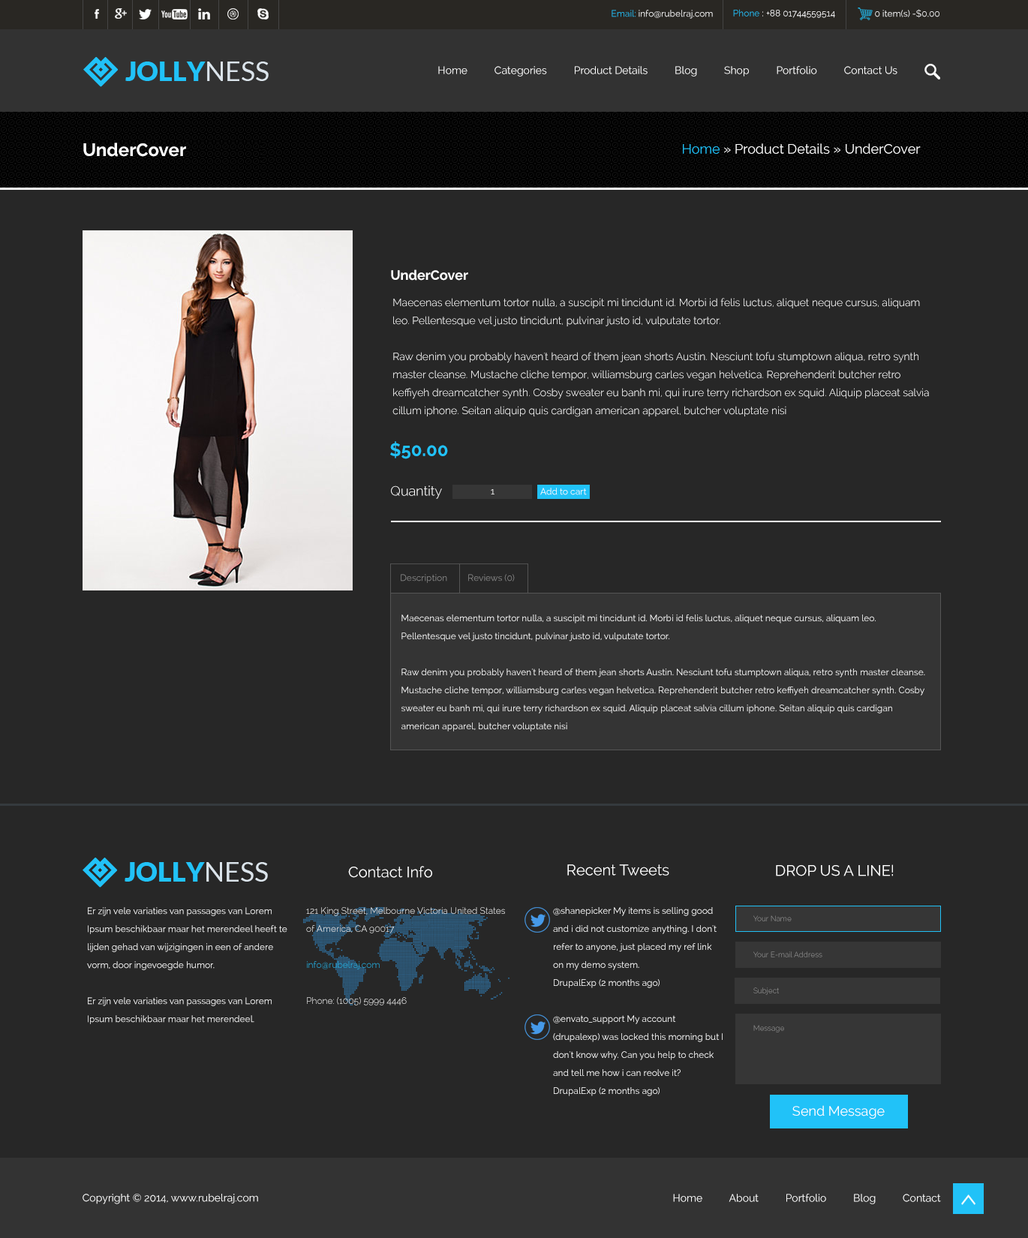
<style>
.page{position:relative;width:1028px;height:1238px;background:#272727}
.page>*{position:absolute;margin:0}
.t1{font:9px "Raleway-Regular"}
.t2{font:9px "Raleway-Regular";color:#ffffff}
.t3{font:9px "Raleway-Regular";color:#21c2f8}
.t4{font:10.5px "Raleway-Regular";color:#ffffff}
.t5{font:18px "Raleway-Bold";color:#ffffff}
.t6{font:13.5px "Raleway-Regular";color:#ffffff}
.t7{font:13.5px "Raleway-Regular";color:#21c2f8}
.t8{font:13.5px "Raleway-Bold";color:#ffffff}
.t9{font:10.5px/18px "Raleway-Light";color:#ffffff}
.t10{font:18px "Raleway-Bold";color:#21c2f8}
.t11{font:13.5px "Raleway-Light";color:#ffffff}
.t12{font:9px "Raleway-Regular";color:#888888}
.t13{font:9px/18px "Raleway-Regular";color:#ffffff}
.t14{font:15px "Raleway-Regular";color:#ffffff}
.t15{font:9px/18px "Raleway-Light"}
.t16{font:7.5px "Raleway-Light";color:#999999}
.t17{font:7.5px "Raleway-Light"}
</style>
<div class="page">
<p class="t1" style="left:611px;top:10px;width:101px;height:9px">Email: info@rubelraj.com</p>
<p class="t2" style="left:733px;top:9px;width:102px;height:9px"><span class="t3">Phone </span>: +88 01744559514</p>
<p class="t1" style="left:874px;top:9px;width:65px;height:9px">0 item(s) -$0.00</p>
<p class="t4" style="left:438px;top:66px;width:459px;height:10px">Home          Categories          Product Details          Blog          Shop          Portfolio          Contact Us</p>
<p class="t5" style="left:83px;top:142px;width:103px;height:15px">UnderCover</p>
<p class="t6" style="left:682px;top:143px;width:238px;height:11px"><span class="t7">Home</span> » Product Details » UnderCover</p>
<p class="t8" style="left:391px;top:269px;width:77px;height:11px">UnderCover</p>
<p class="t9" style="left:392px;top:298px;width:536px;height:119px">Maecenas elementum tortor nulla, a suscipit mi tincidunt id. Morbi id felis luctus, aliquet neque cursus, aliquam leo. Pellentesque vel justo tincidunt, pulvinar justo id, vulputate tortor.<br><br>Raw denim you probably haven't heard of them jean shorts Austin. Nesciunt tofu stumptown aliqua, retro synth master cleanse. Mustache cliche tempor, williamsburg carles vegan helvetica. Reprehenderit butcher retro keffiyeh dreamcatcher synth. Cosby sweater eu banh mi, qui irure terry richardson ex squid. Aliquip placeat salvia cillum iphone. Seitan aliquip quis cardigan american apparel, butcher voluptate nisi</p>
<p class="t10" style="left:390px;top:441px;width:58px;height:18px">$50.00</p>
<p class="t11" style="left:391px;top:485px;width:51px;height:14px">Quantity</p>
<p class="t2" style="left:490px;top:489px;width:4px;height:5px">1</p>
<p class="t2" style="left:540px;top:488px;width:46px;height:7px">Add to cart</p>
<p class="t12" style="left:400px;top:574px;width:47px;height:9px">Description</p>
<p class="t12" style="left:468px;top:574px;width:46px;height:7px">Reviews (0)</p>
<p class="t13" style="left:401px;top:614px;width:524px;height:117px">Maecenas elementum tortor nulla, a suscipit mi tincidunt id. Morbi id felis luctus, aliquet neque cursus, aliquam leo. Pellentesque vel justo tincidunt, pulvinar justo id, vulputate tortor.<br><br>Raw denim you probably haven't heard of them jean shorts Austin. Nesciunt tofu stumptown aliqua, retro synth master cleanse. Mustache cliche tempor, williamsburg carles vegan helvetica. Reprehenderit butcher retro keffiyeh dreamcatcher synth. Cosby sweater eu banh mi, qui irure terry richardson ex squid. Aliquip placeat salvia cillum iphone. Seitan aliquip quis cardigan american apparel, butcher voluptate nisi</p>
<p class="t14" style="left:348px;top:866px;width:84px;height:12px">Contact Info</p>
<p class="t14" style="left:567px;top:864px;width:102px;height:11px">Recent Tweets</p>
<p class="t14" style="left:776px;top:864px;width:116px;height:12px">DROP US A LINE!</p>
<p class="t13" style="left:87px;top:907px;width:200px;height:117px">Er zijn vele variaties van passages van Lorem Ipsum beschikbaar maar het merendeel heeft te lijden gehad van wijzigingen in een of andere vorm, door ingevoegde humor.<br><br>Er zijn vele variaties van passages van Lorem Ipsum beschikbaar maar het merendeel.</p>
<p class="t15" style="left:306px;top:907px;width:199px;height:98px">121 King Street, Melbourne Victoria United States of America, CA 90017<br><br>info@rubelraj.com<br><br>Phone: (1005) 5999 4446</p>
<p class="t13" style="left:553px;top:907px;width:169px;height:189px">@shanepicker My items is selling good and i did not customize anything. I don't refer to anyone, just placed my ref link on my demo system.<br>DrupalExp (2 months ago)<br><br>@envato_support My account (drupalexp) was locked this morning but I don't know why. Can you help to check and tell me how i can reolve it?<br>DrupalExp (2 months ago)</p>
<p class="t16" style="left:753px;top:915px;width:38px;height:6px">Your Name</p>
<p class="t16" style="left:753px;top:951px;width:69px;height:6px">Your E-mail Address</p>
<p class="t17" style="left:753px;top:987px;width:25px;height:7px">Subject</p>
<p class="t17" style="left:753px;top:1024px;width:31px;height:8px">Message</p>
<p class="t6" style="left:792px;top:1105px;width:92px;height:13px">Send Message</p>
<p class="t4" style="left:82px;top:1193px;width:176px;height:11px">Copyright © 2014, www.rubelraj.com</p>
<p class="t4" style="left:673px;top:1193px;width:267px;height:11px">Home          About          Portfolio          Blog          Contact</p>
</div>
